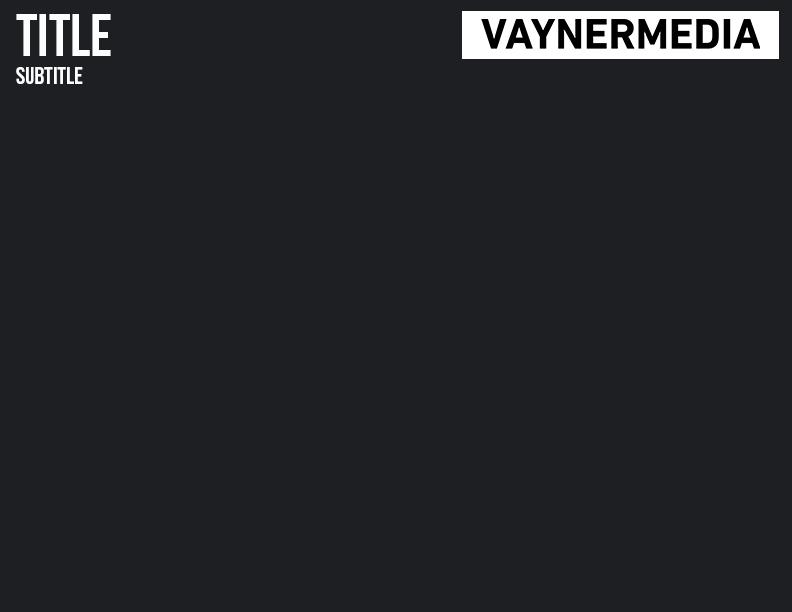
<style>
.page{position:relative;width:792px;height:612px;background:#1e1f22}
.page>*{position:absolute;margin:0}
.t1{font:60px "BebasNeue";color:#fbfdff}
.t2{font:24px "BebasNeue";color:#fbfdff}
</style>
<div class="page">
<p class="t1" style="left:16px;top:14px;width:95px;height:42px">Title</p>
<p class="t2" style="left:16px;top:67px;width:67px;height:17px">Subtitle</p>
</div>
